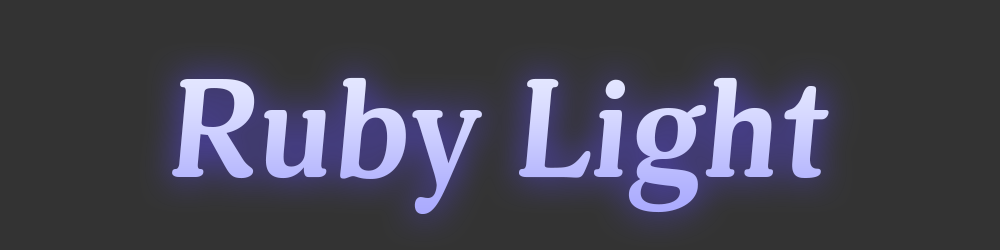
<style>
.page{position:relative;width:1000px;height:250px;background:#333333}
.page>*{position:absolute;margin:0}
.t1{font:139.4px "Adonis-Bold";color:#caccff}
</style>
<div class="page">
<p class="t1" style="left:172px;top:77px;width:657px;height:138px">Ruby Light</p>
</div>
